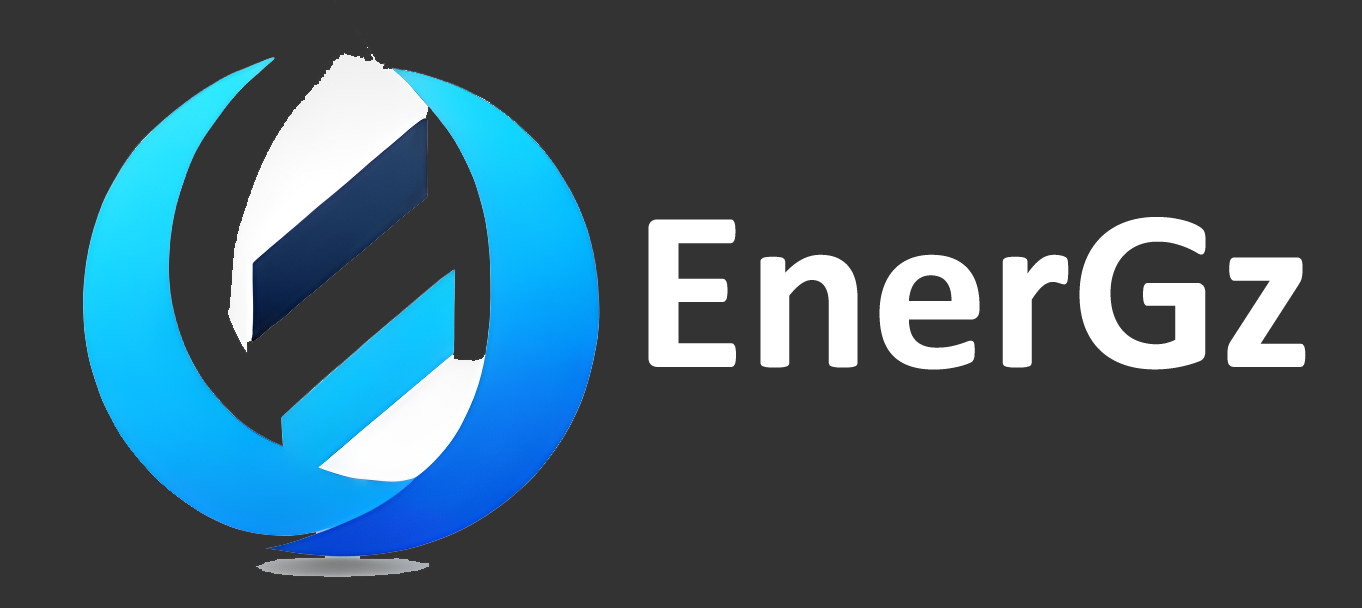
<style>
.page{position:relative;width:1362px;height:608px;background:#333333}
.page>*{position:absolute;margin:0}
.t1{font:233px "Calibri-Bold";color:#ffffff}
</style>
<div class="page">
<p class="t1" style="left:648px;top:217px;width:658px;height:153px">EnerGz</p>
</div>
